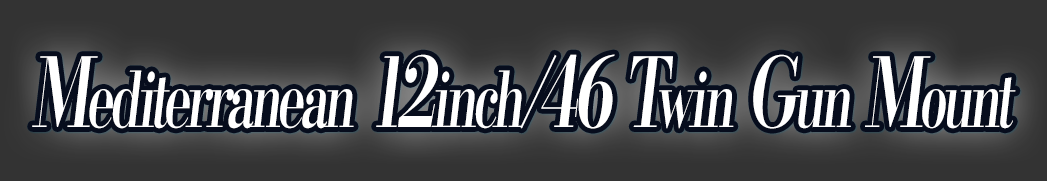
<style>
.page{position:relative;width:1047px;height:181px;background:#333333}
.page>*{position:absolute;margin:0}
.t1{font:76.8px "KochoStd-Heavy";letter-spacing:-0.08em;color:#ffffff;font-style:italic;scale:0.66 1}
.t2{font:96px "KochoStd-Heavy";letter-spacing:-0.08em;color:#ffffff;font-style:italic;scale:0.66 1}
</style>
<div class="page">
<p class="t1" style="left:32px;top:54px;width:984px;height:75px"><span class="t2">M</span>editerranean<span class="t2"> 12</span>inch<span class="t2">/46 T</span>win<span class="t2"> G</span>un<span class="t2"> M</span>ount</p>
</div>
